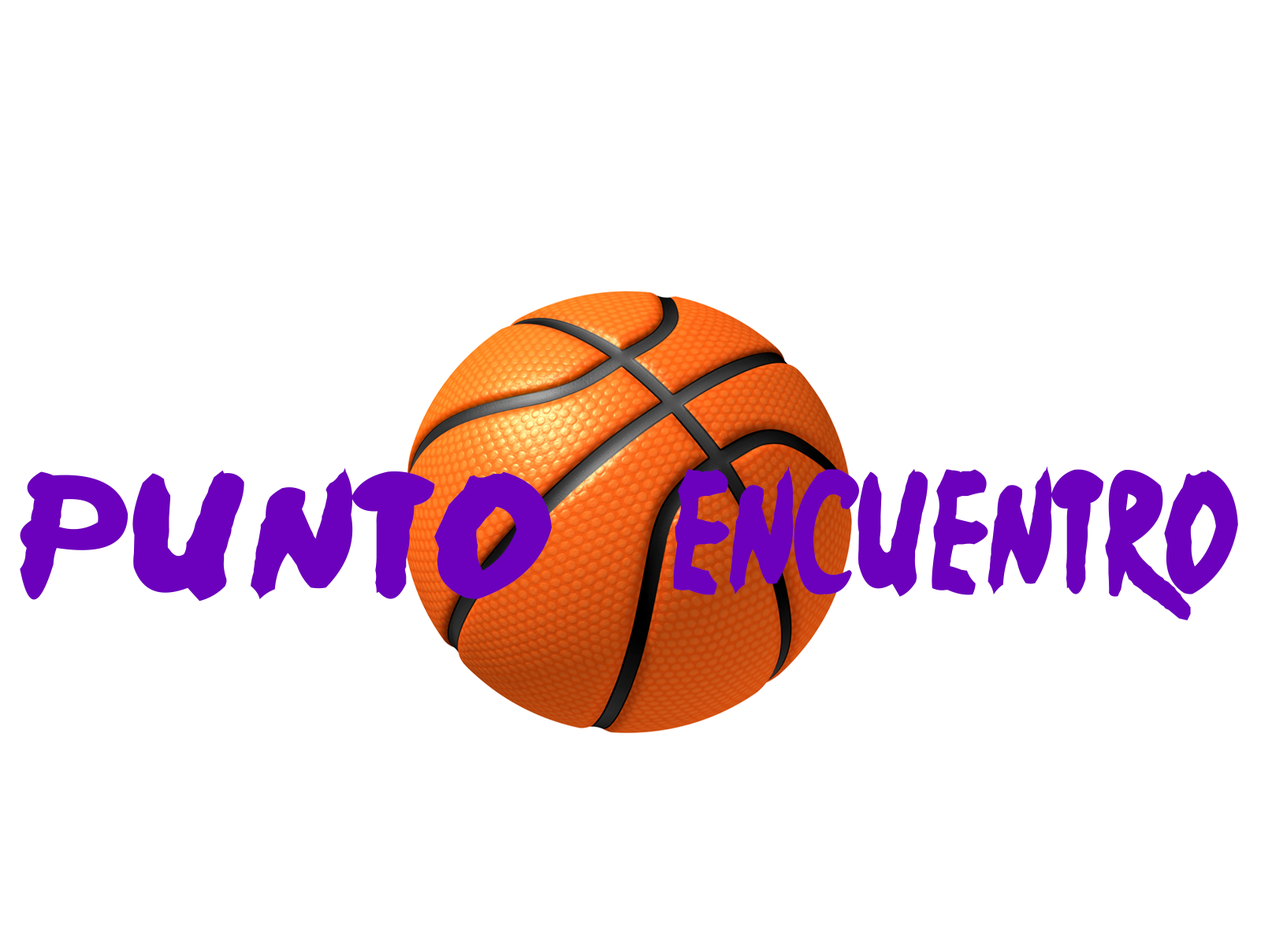
<style>
.page{position:relative;width:1261px;height:946px;background:#ffffff}
.page>*{position:absolute;margin:0}
.t1{font:141.2px "Ninja-Naruto";color:#6b01bc;scale:1.21 1}
.t2{font:138px "Ninja-Naruto";color:#6b01bc;scale:0.78 1}
</style>
<div class="page">
<p class="t1" style="left:20px;top:467px;width:532px;height:134px">Punto</p>
<p class="t2" style="left:673px;top:466px;width:565px;height:154px">Encuentro</p>
</div>
